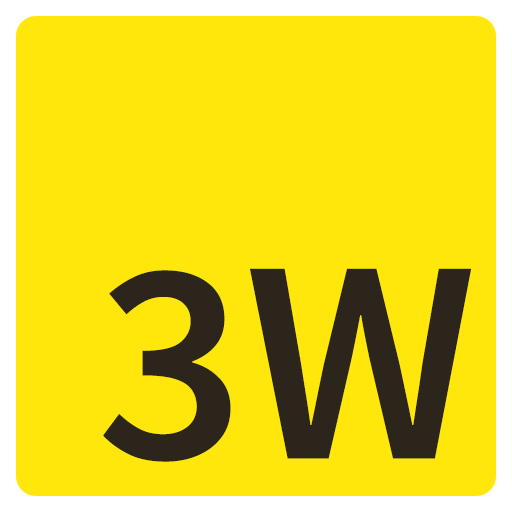
<style>
.page{position:relative;width:512px;height:512px;background:#ffe70b}
.page>*{position:absolute;margin:0}
.t1{font:289.5px "SourceSansPro-Semibold";color:#2c251b}
</style>
<div class="page">
<p class="t1" style="left:103px;top:268px;width:369px;height:194px">3W</p>
</div>
